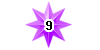
<style>
.page{position:relative;width:100px;height:50px;background:#ffffff}
.page>*{position:absolute;margin:0}
.t1{font:12px "Dotum";color:#000000;font-weight:bold}
</style>
<div class="page">
<p class="t1" style="left:46px;top:21px;width:6px;height:9px">9</p>
</div>
